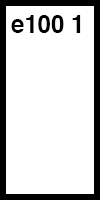
<style>
.page{position:relative;width:100px;height:200px;background:#ffffff}
.page>*{position:absolute;margin:0}
.t1{font:24px "Helvetica-Bold";color:#000000}
</style>
<div class="page">
<p class="t1" style="left:11px;top:15px;width:70px;height:18px">e100 1</p>
</div>
